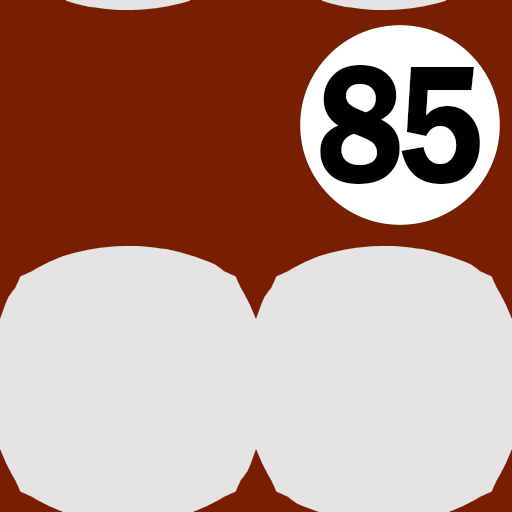
<style>
.page{position:relative;width:512px;height:512px;background:#e4e4e4}
.page>*{position:absolute;margin:0}
.t1{font:172.5px "FranklinGothic-Demi";letter-spacing:-0.05em;color:#010101;scale:0.87 1}
</style>
<div class="page">
<p class="t1" style="left:320px;top:65px;width:160px;height:119px">85</p>
</div>
